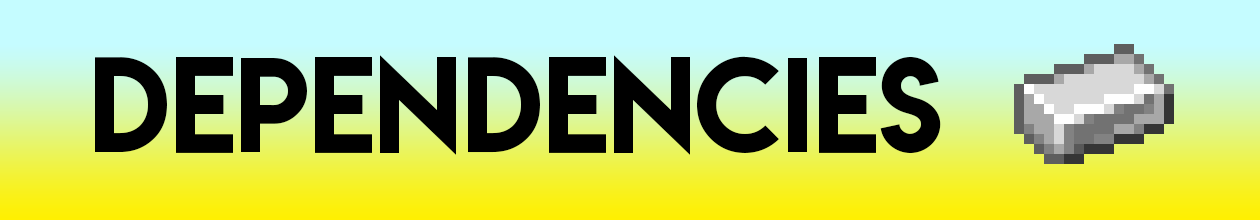
<style>
.page{position:relative;width:1260px;height:220px;background:#c5fcff}
.page>*{position:absolute;margin:0}
.t1{font:120px "LemonMilk";color:#000000}
</style>
<div class="page">
<p class="t1" style="left:95px;top:55px;width:846px;height:100px">dependencies</p>
</div>
